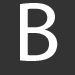
<style>
.page{position:relative;width:75px;height:75px;background:#333333}
.page>*{position:absolute;margin:0}
.t1{font:84.2px "MyriadPro-Regular";color:#ffffff;scale:1.05 1}
</style>
<div class="page">
<p class="t1" style="left:20px;top:3px;width:38px;height:58px">B</p>
</div>
